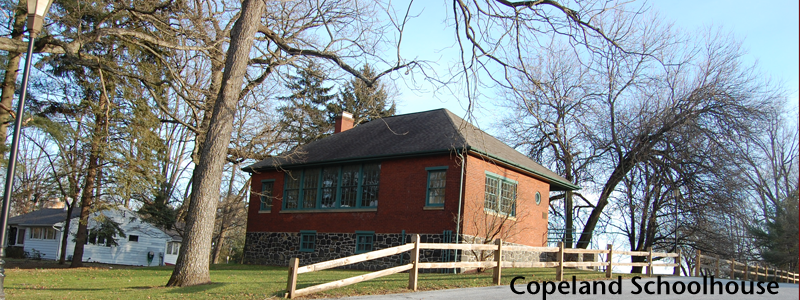
<style>
.page{position:relative;width:800px;height:300px}
.page>*{position:absolute;margin:0}
.t1{font:25px "StoneSansSemITCTTSemi";color:#000000}
</style>
<div class="page">
<p class="t1" style="left:510px;top:275px;width:269px;height:26px">Copeland Schoolhouse</p>
</div>
